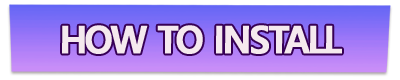
<style>
.page{position:relative;width:400px;height:80px}
.page>*{position:absolute;margin:0}
.t1{font:38px "MalgunGothicBold";letter-spacing:-0.06em;color:#f5e9ee;text-transform:uppercase;font-weight:bold;scale:0.95 1}
</style>
<div class="page">
<p class="t1" style="left:62px;top:25px;width:280px;height:29px">how to install</p>
</div>
